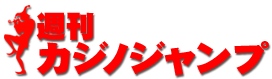
<style>
.page{position:relative;width:272px;height:79px;background:#ffffff}
.page>*{position:absolute;margin:0}
.t1{font:35.1px/29.7px "DFGothic-SU-WING-RKSJ-H";letter-spacing:0.1em;color:#ff0000;scale:1.09 1}
.t2{font:29.8px/29.7px "DFGothic-SU-WING-RKSJ-H";letter-spacing:0.1em;color:#ff0000}
</style>
<div class="page">
<p class="t1" style="left:36px;top:12px;width:233px;height:64px"><span class="t2">週刊<br></span>カジノジャンプ</p>
</div>
